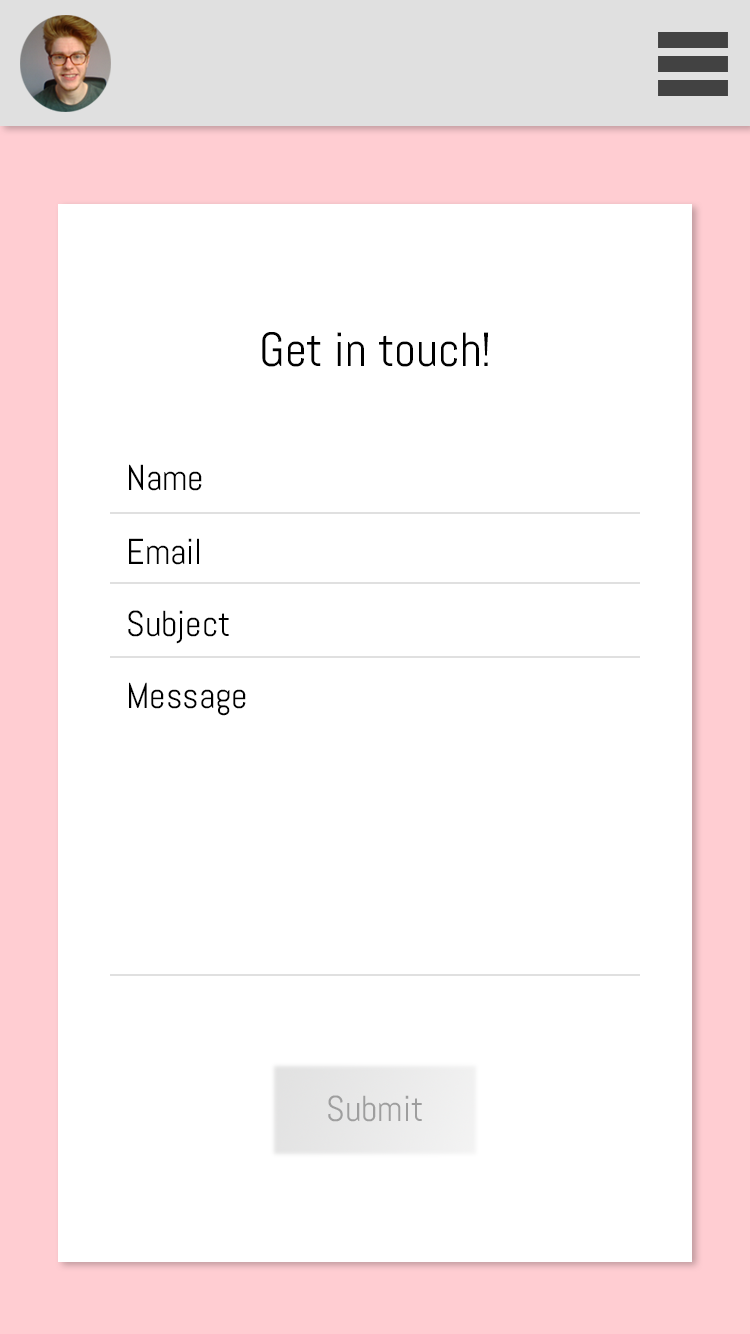
<style>
.page{position:relative;width:750px;height:1334px;background:#ffffff}
.page>*{position:absolute;margin:0}
.t1{font:48px "Abel-Regular";color:#000000}
.t2{font:36px "Abel-Regular";color:#000000}
.t3{font:36px "Abel-Regular";color:#9e9e9e}
</style>
<div class="page">
<p class="t1" style="left:262px;top:332px;width:227px;height:35px">Get in touch!</p>
<p class="t2" style="left:129px;top:464px;width:73px;height:27px">Name</p>
<p class="t2" style="left:129px;top:538px;width:70px;height:27px">Email</p>
<p class="t2" style="left:128px;top:610px;width:101px;height:34px">Subject</p>
<p class="t2" style="left:129px;top:682px;width:117px;height:34px">Message</p>
<p class="t3" style="left:328px;top:1095px;width:94px;height:27px">Submit</p>
</div>
